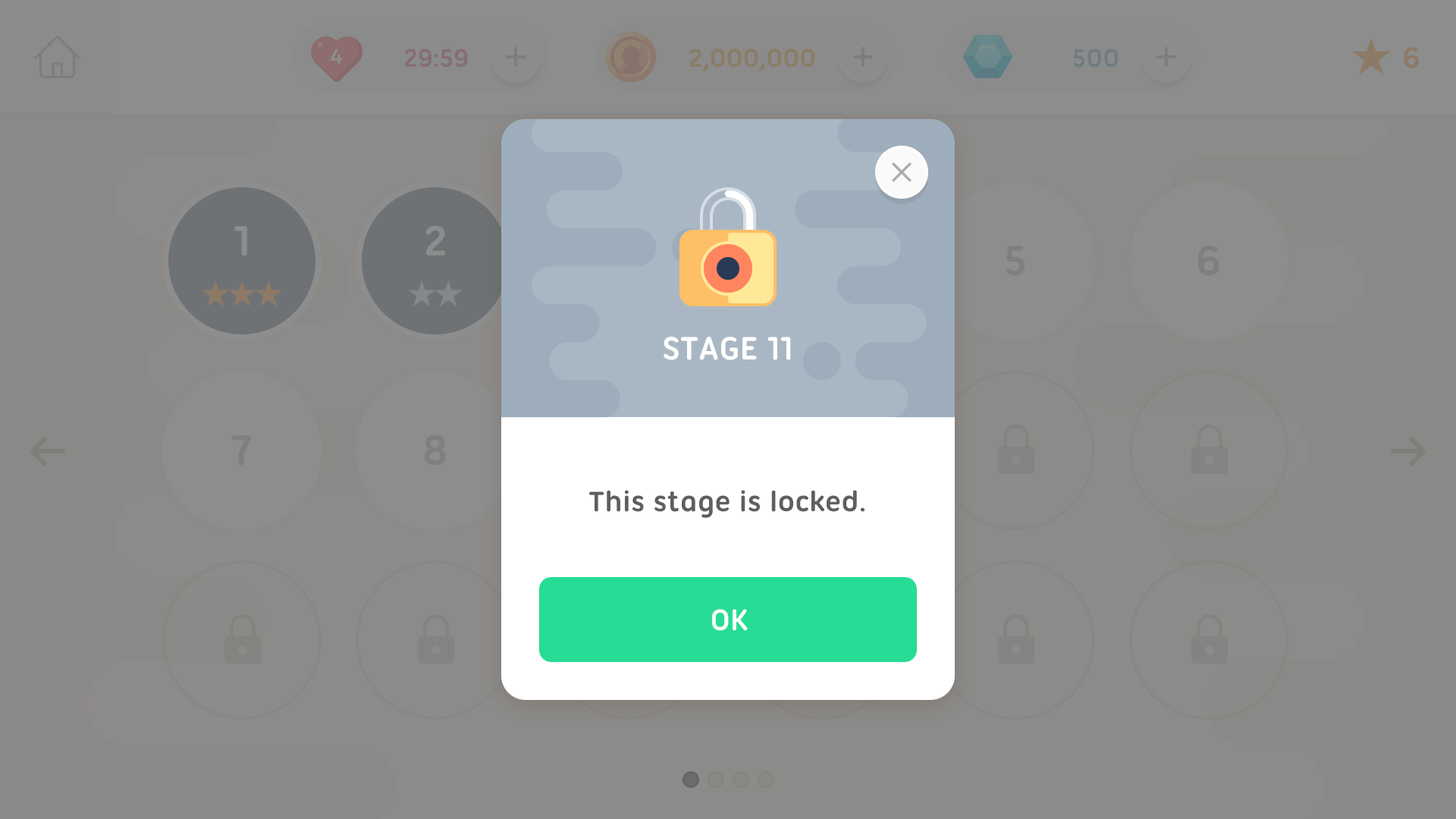
<style>
.page{position:relative;width:1456px;height:819px;background:#8c8b89}
.page>*{position:absolute;margin:0}
.t1{font:34.9px "UbuntuTitling-Bold";color:#ffffff;text-transform:uppercase}
.t2{font:30.3px "UbuntuTitling-Bold";color:#5f5f5f}
.t3{font:31.8px "UbuntuTitling-Bold";color:#ffffff;text-transform:uppercase}
</style>
<div class="page">
<p class="t1" style="left:664px;top:337px;width:127px;height:23px">Stage 11</p>
<p class="t2" style="left:589px;top:490px;width:275px;height:28px">This stage is locked.</p>
<p class="t3" style="left:712px;top:609px;width:36px;height:22px">ok</p>
</div>
